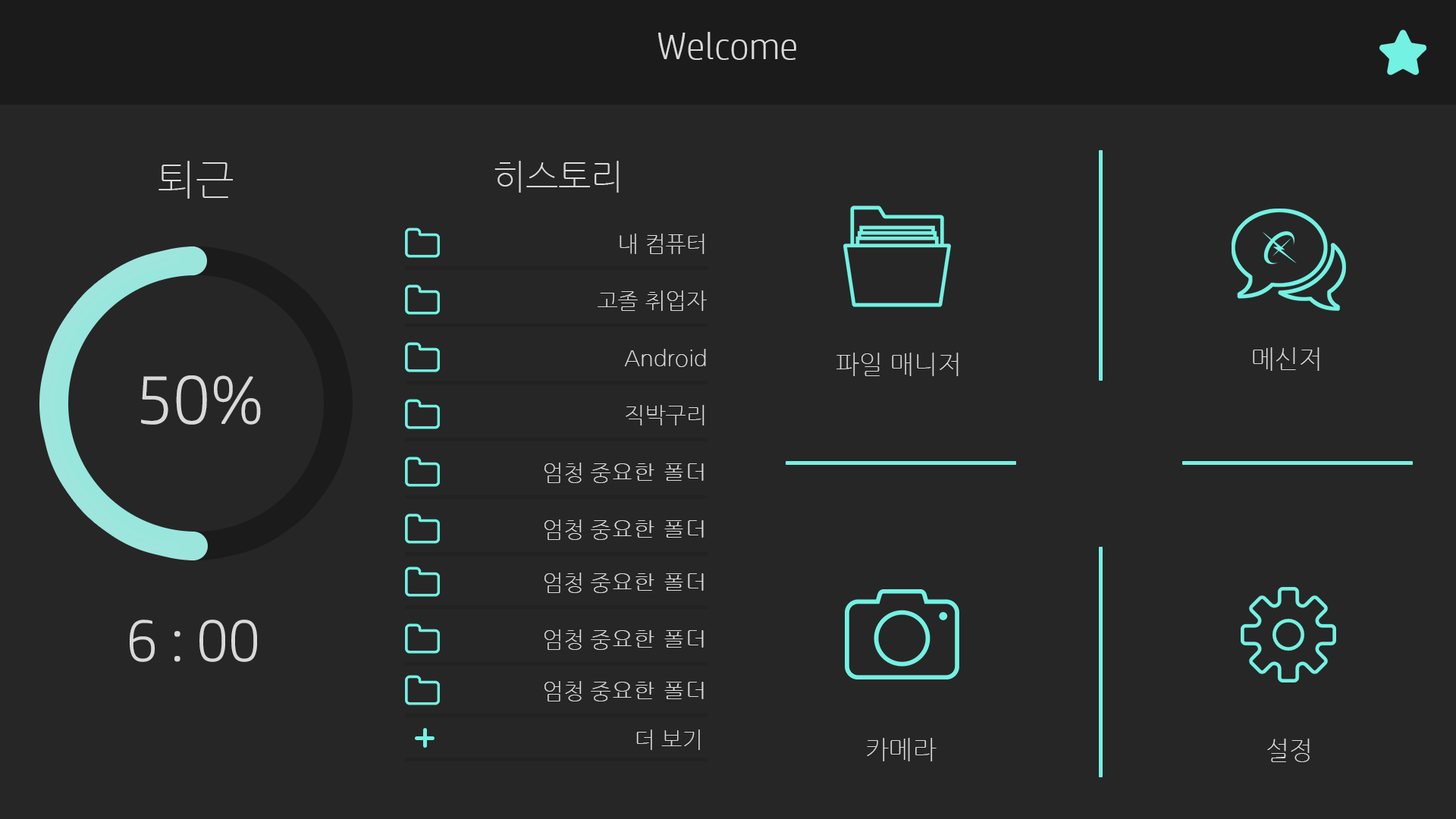
<style>
.page{position:relative;width:1456px;height:819px;background:#262626}
.page>*{position:absolute;margin:0}
.t1{font:37.9px "HPSimplified-Light";color:#d9d9d9}
.t2{font:40.9px "NanumGothicLight";color:#d9d9d9}
.t3{font:34.8px "NanumGothicLight";color:#d9d9d9}
.t4{font:22.1px "NanumGothicLight";color:#d9d9d9}
.t5{font:25.3px "NanumGothicLight";color:#d9d9d9}
.t6{font:70.2px "HPSimplified-Light";color:#d9d9d9}
.t7{font:22.1px "Gulim";color:#d9d9d9}
.t8{font:59.8px "HPSimplified-Light";color:#d9d9d9}
</style>
<div class="page">
<p class="t1" style="left:658px;top:32px;width:138px;height:28px">Welcome</p>
<p class="t2" style="left:158px;top:161px;width:76px;height:38px">퇴근</p>
<p class="t3" style="left:494px;top:161px;width:125px;height:32px">히스토리</p>
<p class="t4" style="left:620px;top:234px;width:84px;height:20px">내 컴퓨터</p>
<p class="t4" style="left:598px;top:290px;width:109px;height:21px">고졸 취업자</p>
<p class="t4" style="left:624px;top:349px;width:82px;height:18px">Android</p>
<p class="t5" style="left:836px;top:353px;width:123px;height:23px">파일 매니저</p>
<p class="t5" style="left:1253px;top:347px;width:66px;height:24px">메신저</p>
<p class="t6" style="left:141px;top:375px;width:120px;height:50px">50%</p>
<p class="t4" style="left:626px;top:405px;width:78px;height:20px">직박구리</p>
<p class="t7" style="left:544px;top:463px;width:160px;height:20px"><span class="t4">엄청 중</span>요한 폴더</p>
<p class="t7" style="left:544px;top:519px;width:160px;height:21px"><span class="t4">엄청 중</span>요한 폴더</p>
<p class="t7" style="left:544px;top:573px;width:160px;height:20px"><span class="t4">엄청 중</span>요한 폴더</p>
<p class="t8" style="left:130px;top:620px;width:127px;height:42px">6 : 00</p>
<p class="t7" style="left:544px;top:629px;width:160px;height:21px"><span class="t4">엄청 중</span>요한 폴더</p>
<p class="t7" style="left:544px;top:681px;width:160px;height:20px"><span class="t4">엄청 중</span>요한 폴더</p>
<p class="t4" style="left:636px;top:730px;width:64px;height:20px">더 보기</p>
<p class="t5" style="left:867px;top:738px;width:70px;height:23px">카메라</p>
<p class="t5" style="left:1267px;top:739px;width:43px;height:23px">설정</p>
</div>
